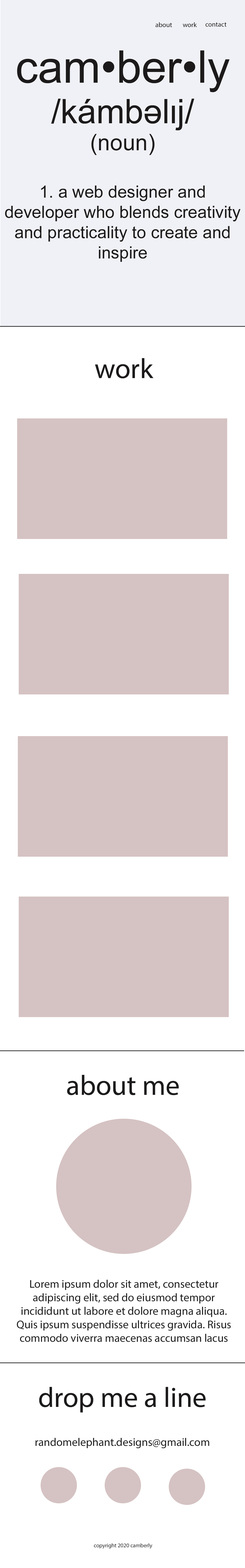
<style>
.page{position:relative;width:245px;height:1568px;background:#ffffff}
.page>*{position:absolute;margin:0}
.t1{font:6.8px "MyriadPro-Regular";color:#1c1a1a}
.t2{font:16.9px "ArialMT";color:#1c1a1a}
.t3{font:45.1px "ArialMT";color:#1c1a1a}
.t4{font:33.8px "ArialMT";color:#1c1a1a}
.t5{font:22.5px "ArialMT";color:#1c1a1a}
.t6{font:28.2px "MyriadPro-Regular";color:#1c1a1a}
.t7{font:11.3px "MyriadPro-Regular";color:#1c1a1a}
.t8{font:5.6px "MyriadPro-Regular";color:#1c1a1a}
</style>
<div class="page">
<p class="t1" style="left:155px;top:22px;width:17px;height:5px">about</p>
<p class="t1" style="left:183px;top:22px;width:14px;height:5px">work</p>
<p class="t1" style="left:205px;top:22px;width:21px;height:5px">contact</p>
<p class="t2" style="left:5px;top:50px;width:235px;height:212px;text-align:center"><span class="t3">cam•ber•ly<br></span><span class="t4">/kámbəlɪj/<br></span><span class="t5">(noun)<br><br></span>1. a web designer and developer who blends creativity and practicality to create and inspire</p>
<p class="t6" style="left:95px;top:358px;width:58px;height:21px">work</p>
<p class="t6" style="left:67px;top:1075px;width:112px;height:20px">about me</p>
<p class="t7" style="left:17px;top:1280px;width:214px;height:62px;text-align:center">Lorem ipsum dolor sit amet, consectetur adipiscing elit, sed do eiusmod tempor incididunt ut labore et dolore magna aliqua. Quis ipsum suspendisse ultrices gravida. Risus commodo viverra maecenas accumsan lacus vel facilisis.</p>
<p class="t6" style="left:39px;top:1387px;width:166px;height:26px">drop me a line</p>
<p class="t7" style="left:35px;top:1438px;width:174px;height:10px">randomelephant.designs@gmail.com</p>
<p class="t8" style="left:94px;top:1543px;width:58px;height:6px">copyright 2020 camberly</p>
</div>
